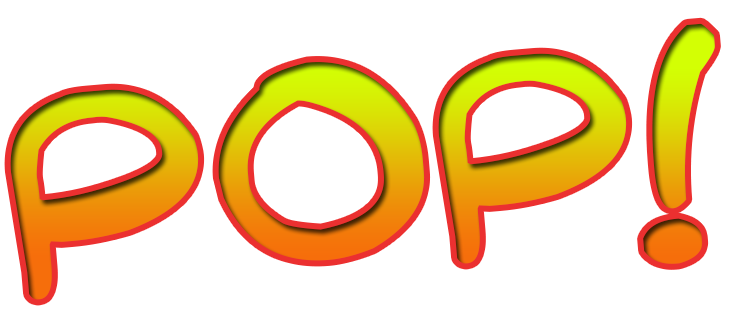
<style>
.page{position:relative;width:729px;height:323px;background:#ffffff}
.page>*{position:absolute;margin:0}
.t1{font:270px "Cartoons123"}
</style>
<div class="page">
<p class="t1" style="left:10px;top:23px;width:705px;height:277px;rotate:-5deg">pop!</p>
</div>
